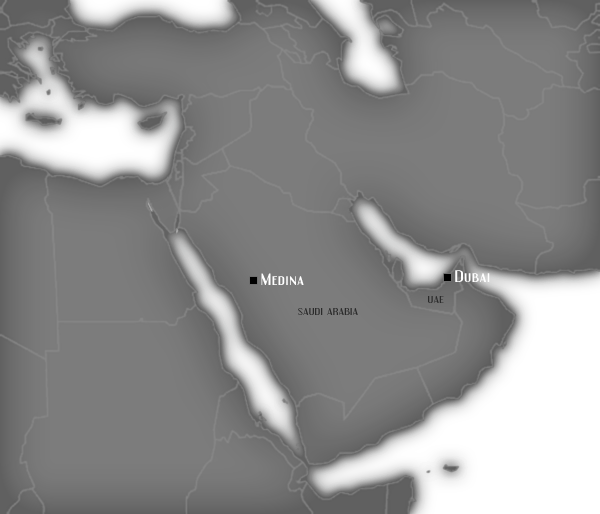
<style>
.page{position:relative;width:600px;height:514px;background:#7c7c7c}
.page>*{position:absolute;margin:0}
.t1{font:14.4px "Engebrechtre";letter-spacing:0.05em;color:#ffffff;scale:1.25 1}
.t2{font:8.8px "Engebrechtre";letter-spacing:0.05em;color:#424242;scale:1.25 1}
</style>
<div class="page">
<p class="t1" style="left:455px;top:270px;width:35px;height:12px">Dubai</p>
<p class="t1" style="left:261px;top:273px;width:43px;height:12px">Medina</p>
<p class="t2" style="left:428px;top:296px;width:16px;height:7px">UAE</p>
<p class="t2" style="left:298px;top:308px;width:60px;height:7px">SAUDI ARABIA</p>
</div>
